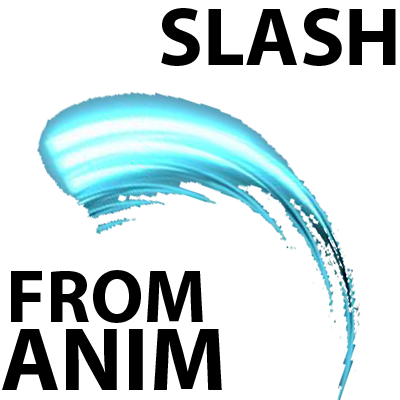
<style>
.page{position:relative;width:400px;height:400px;background:#ffffff}
.page>*{position:absolute;margin:0}
.t1{font:82.4px "MyriadPro-Bold";color:#000000}
.t2{font:74.9px "MyriadPro-Bold";color:#000000}
.t3{font:91.1px "MyriadPro-Bold";color:#000000}
</style>
<div class="page">
<p class="t1" style="left:161px;top:8px;width:235px;height:58px">SLASH</p>
<p class="t2" style="left:11px;top:270px;width:192px;height:53px">FROM</p>
<p class="t3" style="left:2px;top:329px;width:220px;height:61px">ANIM</p>
</div>
